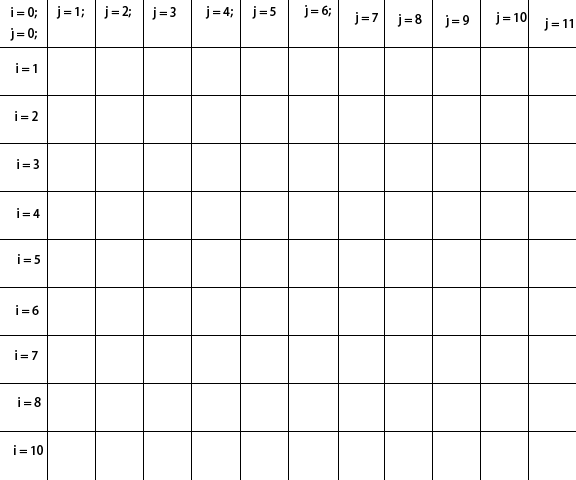
<style>
.page{position:relative;width:576px;height:480px;background:#ffffff}
.page>*{position:absolute;margin:0}
.t1{font:12px "AdobeHeitiStd-Regular";color:#000000}
</style>
<div class="page">
<p class="t1" style="left:56px;top:6px;width:28px;height:13px">j = 1;</p>
<p class="t1" style="left:104px;top:6px;width:27px;height:13px">j = 2;</p>
<p class="t1" style="left:205px;top:6px;width:28px;height:13px">j = 4;</p>
<p class="t1" style="left:252px;top:6px;width:24px;height:13px">j = 5</p>
<p class="t1" style="left:304px;top:5px;width:27px;height:13px">j = 6;</p>
<p class="t1" style="left:10px;top:7px;width:27px;height:34px">i = 0;<br>j = 0;</p>
<p class="t1" style="left:152px;top:7px;width:24px;height:13px">j = 3</p>
<p class="t1" style="left:354px;top:12px;width:24px;height:13px">j = 7</p>
<p class="t1" style="left:397px;top:14px;width:25px;height:13px">j = 8</p>
<p class="t1" style="left:445px;top:15px;width:24px;height:13px">j = 9</p>
<p class="t1" style="left:495px;top:12px;width:32px;height:13px">j = 10</p>
<p class="t1" style="left:544px;top:18px;width:29px;height:13px">j = 11</p>
<p class="t1" style="left:16px;top:63px;width:21px;height:10px">i = 1</p>
<p class="t1" style="left:15px;top:111px;width:23px;height:10px">i = 2</p>
<p class="t1" style="left:17px;top:159px;width:22px;height:10px">i = 3</p>
<p class="t1" style="left:17px;top:208px;width:23px;height:10px">i = 4</p>
<p class="t1" style="left:18px;top:254px;width:22px;height:10px">i = 5</p>
<p class="t1" style="left:16px;top:305px;width:23px;height:10px">i = 6</p>
<p class="t1" style="left:15px;top:350px;width:23px;height:10px">i = 7</p>
<p class="t1" style="left:18px;top:397px;width:23px;height:10px">i = 8</p>
<p class="t1" style="left:14px;top:445px;width:29px;height:10px">i = 10</p>
</div>
